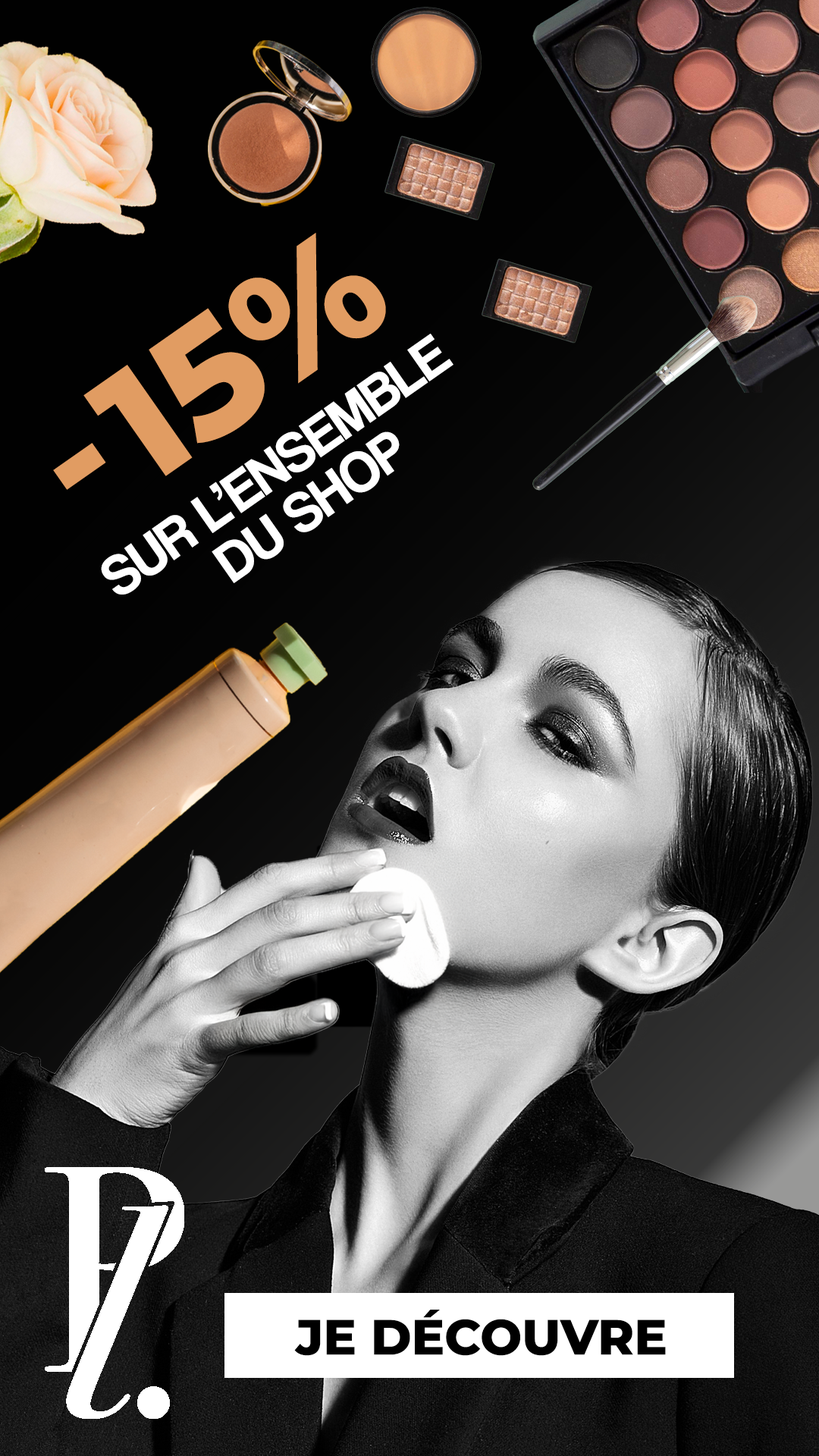
<style>
.page{position:relative;width:819px;height:1456px}
.page>*{position:absolute;margin:0}
.t1{font:161.3px "Montserrat-ExtraBold";color:#e19c62;text-transform:uppercase}
.t2{font:57.6px/53.2px "Coolvetica-Regular";color:#ffffff;text-transform:uppercase}
.t3{font:49.3px "Montserrat-ExtraBold";color:#000000;text-transform:uppercase}
</style>
<div class="page">
<p class="t1" style="left:53px;top:233px;width:333px;height:257px;rotate:-35deg">15%</p>
<p class="t2" style="left:101px;top:334px;width:352px;height:261px;text-align:center;rotate:-35deg">Sur l’ensemble<br> du shop</p>
<p class="t3" style="left:294px;top:1310px;width:372px;height:46px">JE DÉCOUVRE</p>
</div>
